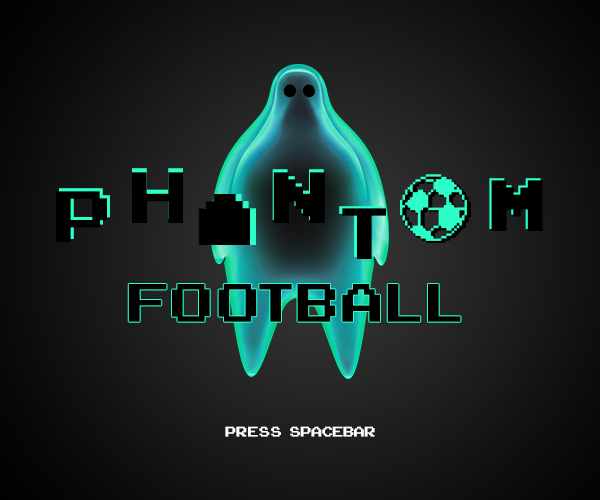
<style>
.page{position:relative;width:600px;height:500px}
.page>*{position:absolute;margin:0}
.t1{font:101.7px "ArcadeClassic";color:#000000}
.t2{font:76px "ArcadeClassic";letter-spacing:0.02em;color:#000000}
.t3{font:19.4px "ArcadeClassic";color:#ffffff}
</style>
<div class="page">
<p class="t1" style="left:132px;top:168px;width:51px;height:51px">H</p>
<p class="t1" style="left:132px;top:172px;width:51px;height:51px">H</p>
<p class="t1" style="left:272px;top:169px;width:52px;height:51px">N</p>
<p class="t1" style="left:273px;top:172px;width:52px;height:51px">N</p>
<p class="t1" style="left:489px;top:178px;width:52px;height:51px">M</p>
<p class="t1" style="left:491px;top:180px;width:52px;height:51px">M</p>
<p class="t1" style="left:56px;top:191px;width:51px;height:51px">P</p>
<p class="t1" style="left:339px;top:206px;width:44px;height:51px">T</p>
<p class="t1" style="left:342px;top:208px;width:44px;height:51px">T</p>
<p class="t2" style="left:128px;top:284px;width:333px;height:38px">FOOTBALL</p>
<p class="t3" style="left:225px;top:426px;width:150px;height:11px">PRESS SPACEBAR</p>
</div>
